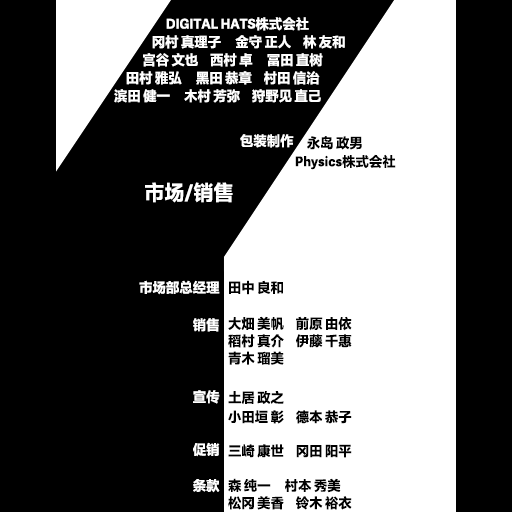
<style>
.page{position:relative;width:512px;height:512px;background:#000000}
.page>*{position:absolute;margin:0}
.t1{font:13.5px/18px "FZLTHProGlobal-Bold";letter-spacing:0.005em;color:#ffffff}
.t2{font:13.5px "FZLTHProGlobal-Bold";letter-spacing:0.005em;color:#ffffff}
.t3{font:13.5px/18.7px "FZLTHProGlobal-Bold";letter-spacing:0.005em;color:#000000}
.t4{font:20.2px "FZLTHProGlobal-Bold";letter-spacing:0.005em;color:#ffffff}
.t5{font:13.5px/18.7px "FZLTHProGlobal-Bold";letter-spacing:0.005em;color:#ffffff}
.t6{font:13.5px/17.3px "FZLTHProGlobal-Bold";letter-spacing:0.005em;color:#ffffff}
.t7{font:13.5px/17.3px "FZLTHProGlobal-Bold";letter-spacing:0.005em;color:#000000}
.t8{font:13.5px/20px "FZLTHProGlobal-Bold";letter-spacing:0.005em;color:#000000}
.t9{font:13.5px/19.3px "FZLTHProGlobal-Bold";letter-spacing:0.005em;color:#000000}
.t10{font:13.5px/16.7px "FZLTHProGlobal-Bold";letter-spacing:0.005em;color:#000000}
</style>
<div class="page">
<p class="t1" style="left:114px;top:17px;width:231px;height:86px">DIGITAL HATS株式会社<br>                冈村 真理子      金守 正人     林 友和<br>            宫谷 文也     西村 卓      冨田 直树<br>     田村 雅弘      黑田 恭章     村田 信治<br>滨田 健一      木村 芳弥     狩野见 直己</p>
<p class="t2" style="left:240px;top:134px;width:54px;height:14px">包装制作</p>
<p class="t3" style="left:295px;top:136px;width:101px;height:34px">永岛 政男 <br>Physics株式会社</p>
<p class="t4" style="left:145px;top:182px;width:88px;height:21px">市场/销售</p>
<p class="t5" style="left:139px;top:280px;width:81px;height:213px;text-align:right">市场部总经理<br><br>销售<br><br><span class="t6"><br><br>宣传<br><br></span><span class="t1"><br>促销<br><br>条款</span></p>
<p class="t7" style="left:228px;top:280px;width:124px;height:230px"><span class="t3"><br>田中 良和<br></span><br>大畑 美帆     前原 由依<br>稻村 真介     伊藤 千惠<br><span class="t8">青木 瑠美<br></span><span class="t9"><br>土居 政之<br></span><span class="t10">小田垣 彰     德本 恭子<br></span><br>三崎 康世     冈田 阳平<br><br>森 纯一      村本 秀美<br>松冈 美香     铃木 裕衣</p>
</div>
